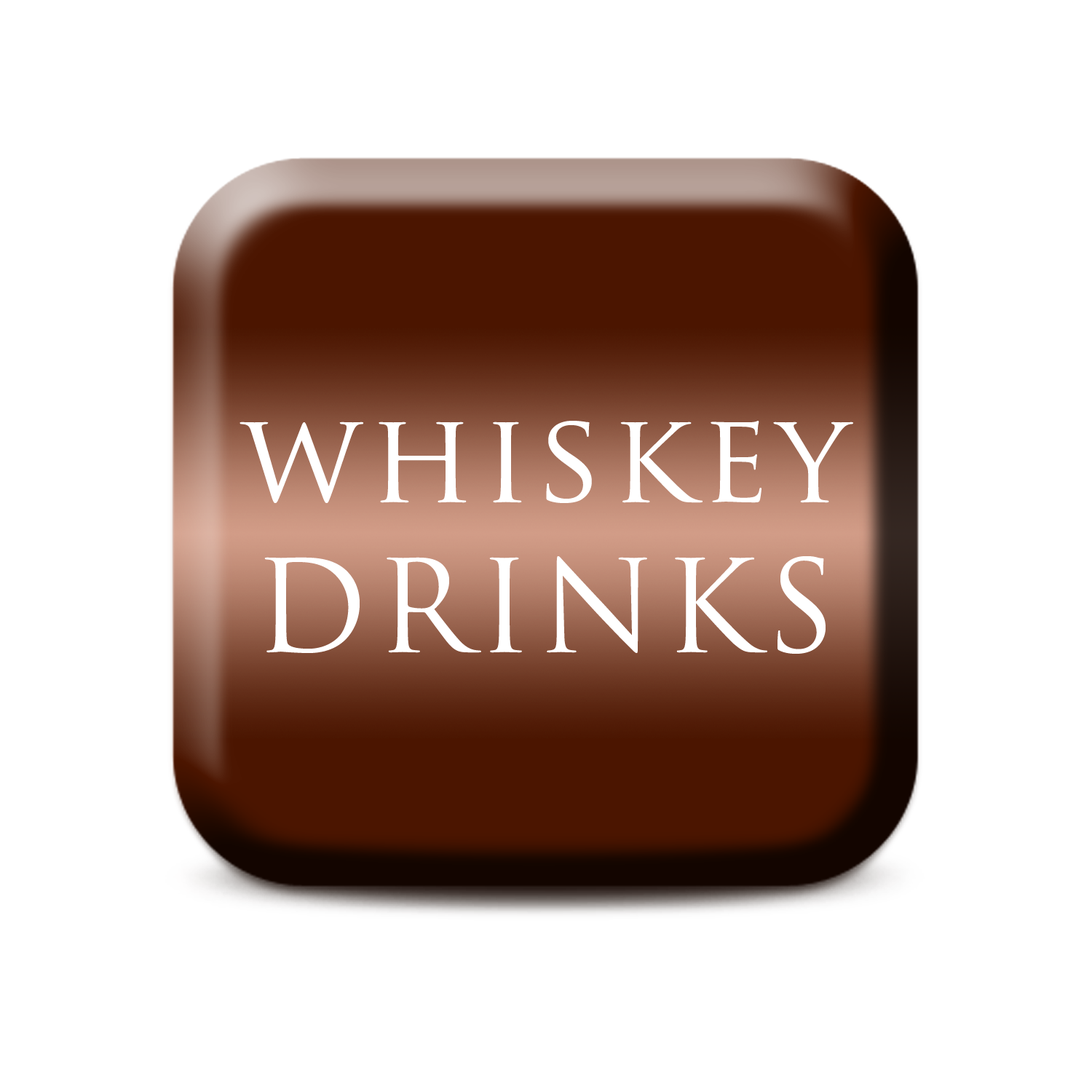
<style>
.page{position:relative;width:1092px;height:1092px;background:#ffffff}
.page>*{position:absolute;margin:0}
.t1{font:124.5px "TrajanPro-Regular";letter-spacing:0.06em;color:#ffffff}
</style>
<div class="page">
<p class="t1" style="left:240px;top:421px;width:613px;height:233px;text-align:center">whiskey<br>DRINKS</p>
</div>
